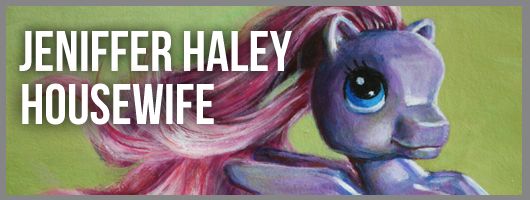
<style>
.page{position:relative;width:530px;height:200px}
.page>*{position:absolute;margin:0}
.t1{font:57px "BebasNeue";color:#ffffff}
</style>
<div class="page">
<p class="t1" style="left:19px;top:31px;width:273px;height:40px">Jeniffer haley</p>
<p class="t1" style="left:22px;top:83px;width:192px;height:42px">Housewife</p>
</div>
